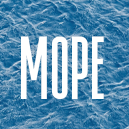
<style>
.page{position:relative;width:129px;height:129px}
.page>*{position:absolute;margin:0}
.t1{font:124.9px "Highliner";color:#fffffe;text-transform:uppercase}
</style>
<div class="page">
<p class="t1" style="left:21px;top:36px;width:83px;height:63px">Море</p>
</div>
